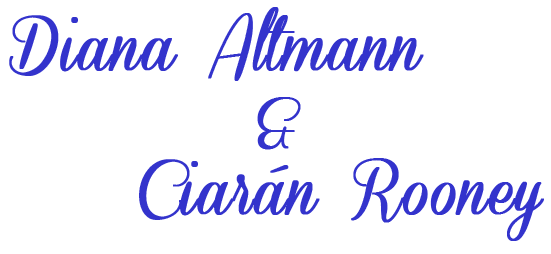
<style>
.page{position:relative;width:551px;height:254px;background:#ffffff}
.page>*{position:absolute;margin:0}
.t1{font:60px "ConeriaScriptDemo";color:#3333cc;font-weight:bold}
</style>
<div class="page">
<p class="t1" style="left:9px;top:7px;width:535px;height:234px;text-align:center">Diana Altmann    <br>&amp;<br>    Ciarán Rooney</p>
</div>
